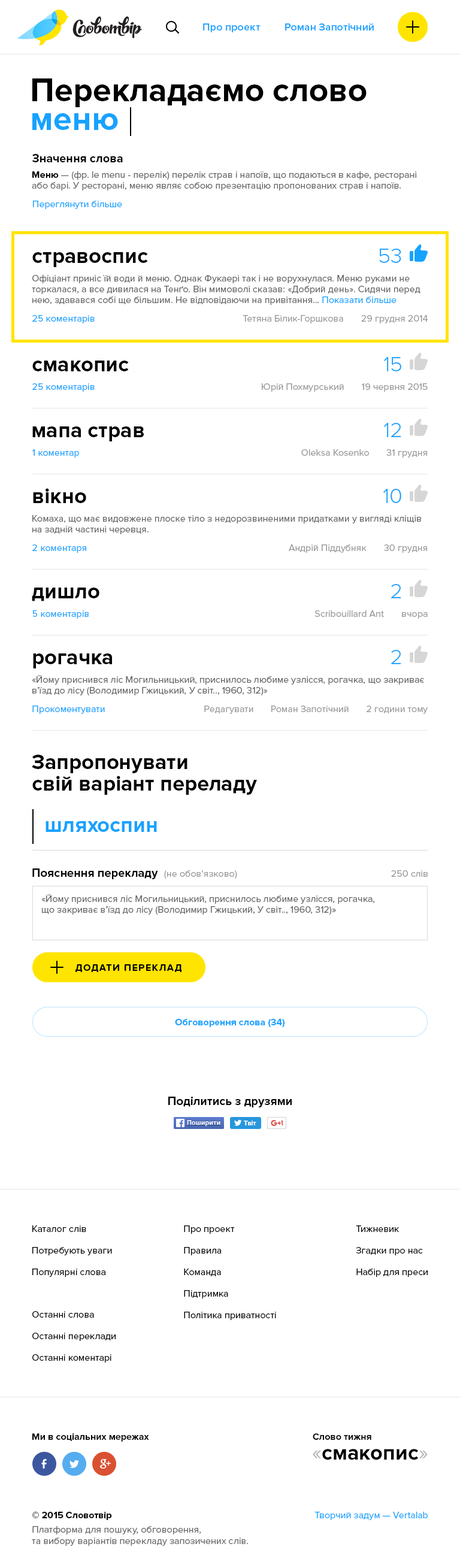
<style>
.page{position:relative;width:460px;height:1568px;background:#ffffff}
.page>*{position:absolute;margin:0}
.t1{font:10.8px "ProximaNova-Semibold";color:#17a2ff}
.t2{font:33.5px "ProximaNova-Bold";color:#000000}
.t3{font:33.5px "ProximaNova-Bold";color:#17a2ff}
.t4{font:12px "ProximaNova-Bold";color:#000000}
.t5{font:9.6px/10.8px "ProximaNova-Regular";color:#666666}
.t6{font:9.6px/10.8px "ProximaNova-Bold";color:#000000}
.t7{font:9.6px "ProximaNova-Regular";color:#17a2ff}
.t8{font:21.6px "ProximaNova-Bold";color:#000000}
.t9{font:21.6px "ProximaNova-Light";color:#17a2ff}
.t10{font:9.6px/10.8px "ProximaNova-Regular";color:#17a2ff}
.t11{font:9.6px "ProximaNova-Regular";color:#999999}
.t12{font:21.6px/21.6px "ProximaNova-Bold";color:#000000}
.t13{font:21.6px/28.7px "ProximaNova-Bold";color:#000000}
.t14{font:21.6px "ProximaNova-Bold";color:#17a2ff}
.t15{font:9.6px "ProximaNova-Bold";letter-spacing:0.1em;color:#000000;text-transform:uppercase}
.t16{font:9.6px "ProximaNova-Bold";color:#17a2ff}
.t17{font:9.6px/21.6px "ProximaNova-Regular";color:#000000}
.t18{font:9.6px/21.6px "ProximaNova-Regular";color:#010101}
.t19{font:9.6px "ProximaNova-Bold";color:#010101}
.t20{font:21.6px "ProximaNova-Regular";color:#b3b3b3}
.t21{font:9.6px "ProximaNova-Regular";color:#666666}
.t22{font:9.6px/13.2px "ProximaNova-Bold";color:#000000}
.t23{font:9.6px/14.4px "ProximaNova-Regular";color:#666666}
</style>
<div class="page">
<p class="t1" style="left:203px;top:23px;width:58px;height:9px">Про проект</p>
<p class="t1" style="left:285px;top:23px;width:89px;height:8px">Роман Запотічний</p>
<p class="t2" style="left:32px;top:78px;width:335px;height:29px">Перекладаємо слово</p>
<p class="t3" style="left:32px;top:113px;width:86px;height:17px">меню</p>
<p class="t4" style="left:32px;top:154px;width:91px;height:8px">Значення слова</p>
<p class="t5" style="left:32px;top:171px;width:384px;height:19px"><span class="t6">Меню</span> — (фр. le menu - перелік) перелік страв і напоїв, що подаються в кафе, ресторані або барі. У ресторані, меню являє собою презентацію пропонованих страв і напоїв.</p>
<p class="t7" style="left:33px;top:201px;width:89px;height:8px">Переглянути більше</p>
<p class="t8" style="left:32px;top:252px;width:116px;height:15px">стравоспис</p>
<p class="t9" style="left:379px;top:249px;width:22px;height:14px">53</p>
<p class="t5" style="left:32px;top:275px;width:388px;height:30px">Офіціант приніс їй води й меню. Однак Фукаері так і не ворухнулася. Меню руками не торкалася, а все дивилася на Тенґо. Він мимоволі сказав: «Добрий день». Сидячи перед нею, здавався собі ще більшим. Не відповідаючи на привітання... <span class="t10">Показати більше</span></p>
<p class="t7" style="left:32px;top:315px;width:63px;height:8px">25 коментарів</p>
<p class="t11" style="left:243px;top:315px;width:100px;height:8px">Тетяна Білик-Горшкова</p>
<p class="t11" style="left:361px;top:315px;width:67px;height:8px">29 грудня 2014</p>
<p class="t8" style="left:32px;top:361px;width:97px;height:10px">смакопис</p>
<p class="t9" style="left:384px;top:357px;width:17px;height:14px">15</p>
<p class="t7" style="left:32px;top:383px;width:63px;height:9px">25 коментарів</p>
<p class="t11" style="left:262px;top:383px;width:82px;height:9px">Юрій Похмурський</p>
<p class="t11" style="left:362px;top:383px;width:66px;height:9px">19 червня 2015</p>
<p class="t9" style="left:384px;top:423px;width:17px;height:14px">12</p>
<p class="t8" style="left:32px;top:426px;width:112px;height:15px">мапа страв</p>
<p class="t7" style="left:32px;top:449px;width:47px;height:9px">1 коментар</p>
<p class="t11" style="left:301px;top:449px;width:68px;height:7px">Oleksa Kosenko</p>
<p class="t11" style="left:386px;top:449px;width:41px;height:9px">31 грудня</p>
<p class="t8" style="left:33px;top:488px;width:53px;height:15px">вікно</p>
<p class="t9" style="left:383px;top:489px;width:18px;height:14px">10</p>
<p class="t5" style="left:32px;top:515px;width:389px;height:19px">Комаха, що має видовжене плоске тіло з недорозвиненими придатками у вигляді кліщів<br>на задній частині черевця.</p>
<p class="t7" style="left:32px;top:544px;width:54px;height:9px">2 коментаря</p>
<p class="t11" style="left:289px;top:544px;width:78px;height:9px">Андрій Піддубняк</p>
<p class="t11" style="left:384px;top:544px;width:43px;height:9px">30 грудня</p>
<p class="t8" style="left:32px;top:588px;width:67px;height:13px">дишло</p>
<p class="t9" style="left:391px;top:584px;width:10px;height:14px">2</p>
<p class="t7" style="left:32px;top:610px;width:57px;height:9px">5 коментарів</p>
<p class="t11" style="left:314px;top:610px;width:70px;height:7px">Scribouillard Ant</p>
<p class="t11" style="left:402px;top:612px;width:26px;height:7px">вчора</p>
<p class="t8" style="left:33px;top:653px;width:79px;height:15px">рогачка</p>
<p class="t9" style="left:391px;top:650px;width:10px;height:14px">2</p>
<p class="t5" style="left:32px;top:675px;width:392px;height:21px">«Йому приснився ліс Могильницький, приснилось любиме узлісся, рогачка, що закриває<br>в’їзд до лісу (Володимир Гжицький, У світ.., 1960, 312)»</p>
<p class="t7" style="left:32px;top:706px;width:73px;height:8px">Прокоментувати</p>
<p class="t11" style="left:204px;top:706px;width:49px;height:8px">Редагувати</p>
<p class="t11" style="left:271px;top:706px;width:78px;height:6px">Роман Запотічний</p>
<p class="t11" style="left:367px;top:706px;width:61px;height:8px">2 години тому</p>
<p class="t12" style="left:32px;top:755px;width:225px;height:40px"><span class="t13">Запропонувати<br></span>свій варіант переладу</p>
<p class="t14" style="left:46px;top:821px;width:111px;height:11px">шляхоспин</p>
<p class="t4" style="left:32px;top:868px;width:126px;height:11px">Пояснення перекладу</p>
<p class="t11" style="left:164px;top:870px;width:73px;height:9px">(не обов'язково)</p>
<p class="t11" style="left:391px;top:870px;width:37px;height:7px">250 слів</p>
<p class="t5" style="left:41px;top:894px;width:334px;height:21px">«Йому приснився ліс Могильницький, приснилось любиме узлісся, рогачка,<br>що закриває в’їзд до лісу (Володимир Гжицький, У світ.., 1960, 312)»</p>
<p class="t15" style="left:75px;top:964px;width:106px;height:8px">Додати переклад</p>
<p class="t16" style="left:175px;top:1019px;width:110px;height:9px">Обговорення слова (34)</p>
<p class="t4" style="left:168px;top:1097px;width:124px;height:10px">Поділитись з друзями</p>
<p class="t17" style="left:32px;top:1225px;width:80px;height:52px">Каталог слів<br>Потребують уваги<br>Популярні слова</p>
<p class="t17" style="left:184px;top:1225px;width:92px;height:95px">Про проект<br>Правила<br>Команда<br>Підтримка<br>Політика приватності</p>
<p class="t18" style="left:356px;top:1225px;width:72px;height:52px">Тижневик<br>Згадки про нас<br>Набір для преси</p>
<p class="t17" style="left:32px;top:1311px;width:84px;height:52px">Останні слова<br>Останні переклади<br>Останні коментарі</p>
<p class="t19" style="left:32px;top:1433px;width:117px;height:9px">Ми в соціальних мережах</p>
<p class="t19" style="left:313px;top:1433px;width:58px;height:7px">Слово тижня</p>
<p class="t8" style="left:313px;top:1449px;width:115px;height:11px"><span class="t20">«</span>смакопис<span class="t20">»</span></p>
<p class="t21" style="left:32px;top:1512px;width:216px;height:34px"><span class="t22">© 2015 Словотвір<br></span><span class="t23">Платформа для пошуку, обговорення,<br></span>та вибору варіантів перекладу запозичених слів.</p>
<p class="t7" style="left:314px;top:1512px;width:114px;height:8px">Творчий задум — Vertalab</p>
</div>
